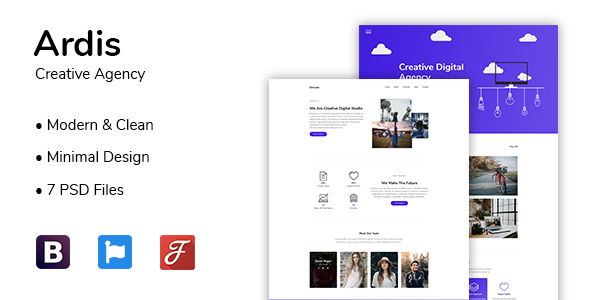
<style>
.page{position:relative;width:590px;height:300px;background:#ffffff}
.page>*{position:absolute;margin:0}
.t1{font:36px "Nunito-Bold";color:#000000}
.t2{font:15px "Nunito-Regular";color:#000000}
</style>
<div class="page">
<p class="t1" style="left:33px;top:30px;width:88px;height:26px">Ardis</p>
<p class="t2" style="left:35px;top:68px;width:111px;height:14px">Creative Agency</p>
<p class="t2" style="left:36px;top:119px;width:117px;height:11px">• Modern &amp; Clean</p>
<p class="t2" style="left:36px;top:151px;width:113px;height:14px">• Minimal Design</p>
<p class="t2" style="left:36px;top:184px;width:88px;height:11px">• 7 PSD Files</p>
</div>
